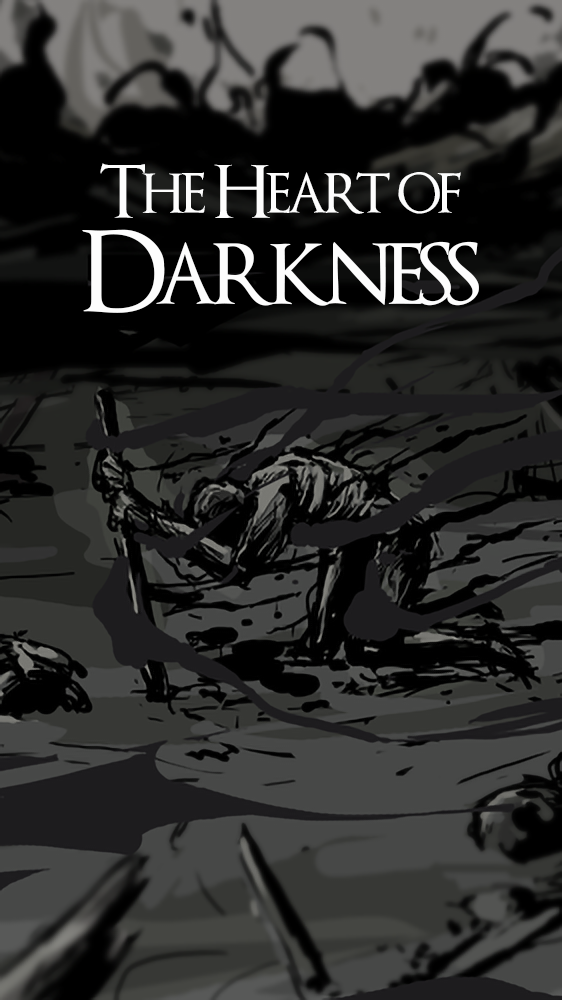
<style>
.page{position:relative;width:562px;height:1000px}
.page>*{position:absolute;margin:0}
.t1{font:72px/94px "OptimusPrinceps";letter-spacing:-0.075em;color:#fdfdfd}
.t2{font:110px/94px "OptimusPrinceps";letter-spacing:-0.075em;color:#fdfdfd}
</style>
<div class="page">
<p class="t1" style="left:82px;top:163px;width:397px;height:150px;text-align:center">The Heart of<br><span class="t2">Darkness</span></p>
</div>
